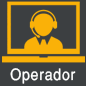
<style>
.page{position:relative;width:86px;height:86px;background:#3c3f41}
.page>*{position:absolute;margin:0}
.t1{font:15.6px "Helvetica-Normal";letter-spacing:0.06em;color:#ffffff;scale:0.89 1}
</style>
<div class="page">
<p class="t1" style="left:10px;top:68px;width:66px;height:16px">Operador</p>
</div>
